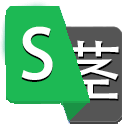
<style>
.page{position:relative;width:128px;height:128px;background:#ffffff}
.page>*{position:absolute;margin:0}
.t1{font:67.4px "AdobeHeitiStd-Regular";color:#ffffff}
</style>
<div class="page">
<p class="t1" style="left:21px;top:28px;width:32px;height:54px">S</p>
<p class="t1" style="left:21px;top:26px;width:32px;height:54px">S</p>
<p class="t1" style="left:60px;top:40px;width:59px;height:59px">茎</p>
</div>
